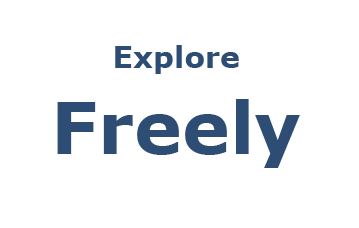
<style>
.page{position:relative;width:359px;height:228px;background:#ffffff}
.page>*{position:absolute;margin:0}
.t1{font:30px "Verdana-Bold";color:#2d4d74}
.t2{font:72px "Verdana-Bold";color:#2d4d74}
</style>
<div class="page">
<p class="t1" style="left:57px;top:45px;width:243px;height:123px;text-align:center">Explore <br><span class="t2">Freely</span></p>
</div>
